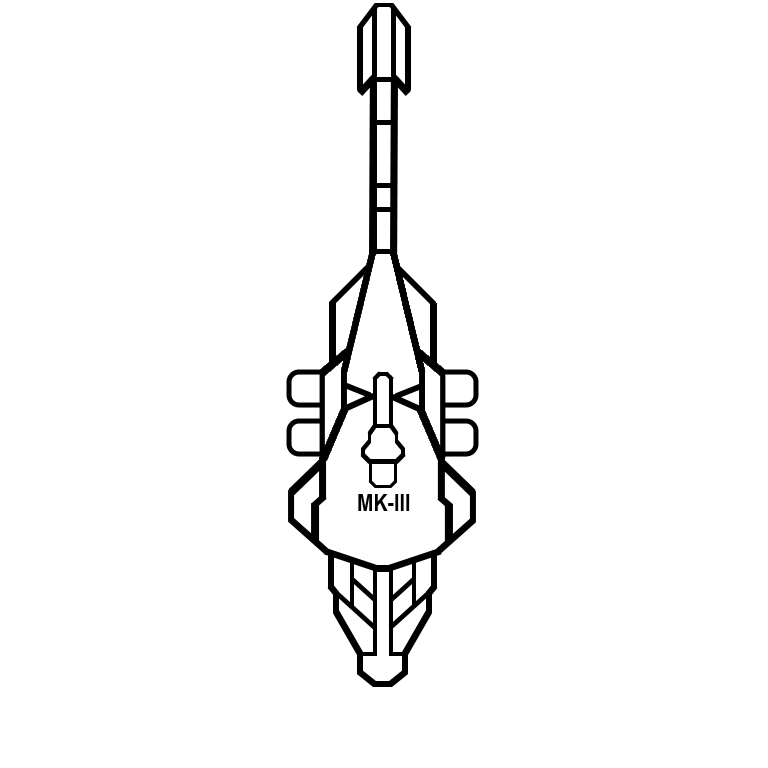
<style>
.page{position:relative;width:768px;height:768px;background:#ffffff}
.page>*{position:absolute;margin:0}
.t1{font:24px "ArialNarrow-Bold";color:#010002}
</style>
<div class="page">
<p class="t1" style="left:358px;top:494px;width:52px;height:17px">MK-III</p>
</div>
